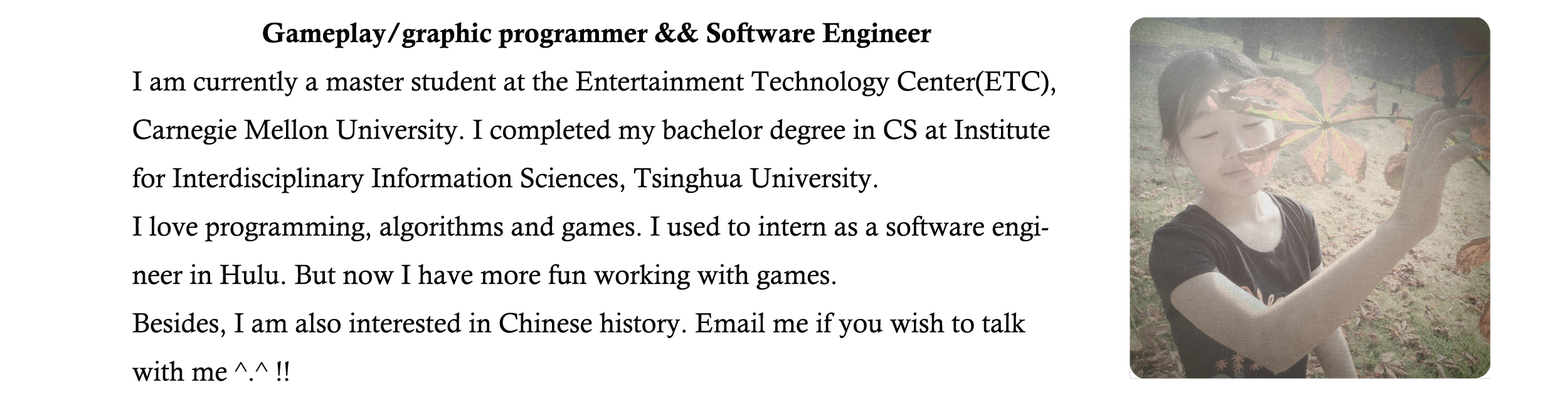
<style>
.page{position:relative;width:1568px;height:395px;background:#ffffff}
.page>*{position:absolute;margin:0}
.t1{font:27.6px "CalistoMT";color:#060606}
.t2{font:27.6px "CalisMTBol";color:#060606}
</style>
<div class="page">
<p class="t1" style="left:132px;top:22px;width:924px;height:359px;text-align:center"><span class="t2">Gameplay/graphic programmer &amp;&amp; Software Engineer<br></span>I am currently a master student at the Entertainment Technology Center(ETC), Carnegie Mellon University. I completed my bachelor degree in CS at Institute for Interdisciplinary Information Sciences, Tsinghua University. <br>I love programming, algorithms and games. I used to intern as a software engineer in Hulu. But now I have more fun working with games.<br>Besides, I am also interested in Chinese history. Email me if you wish to talk with me ^.^ !!</p>
</div>
